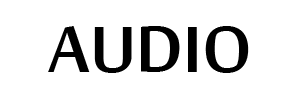
<style>
.page{position:relative;width:300px;height:100px;background:#ffffff}
.page>*{position:absolute;margin:0}
.t1{font:100px "MoolBoran";color:#000000}
</style>
<div class="page">
<p class="t1" style="left:48px;top:26px;width:201px;height:47px">AUDIO</p>
</div>
